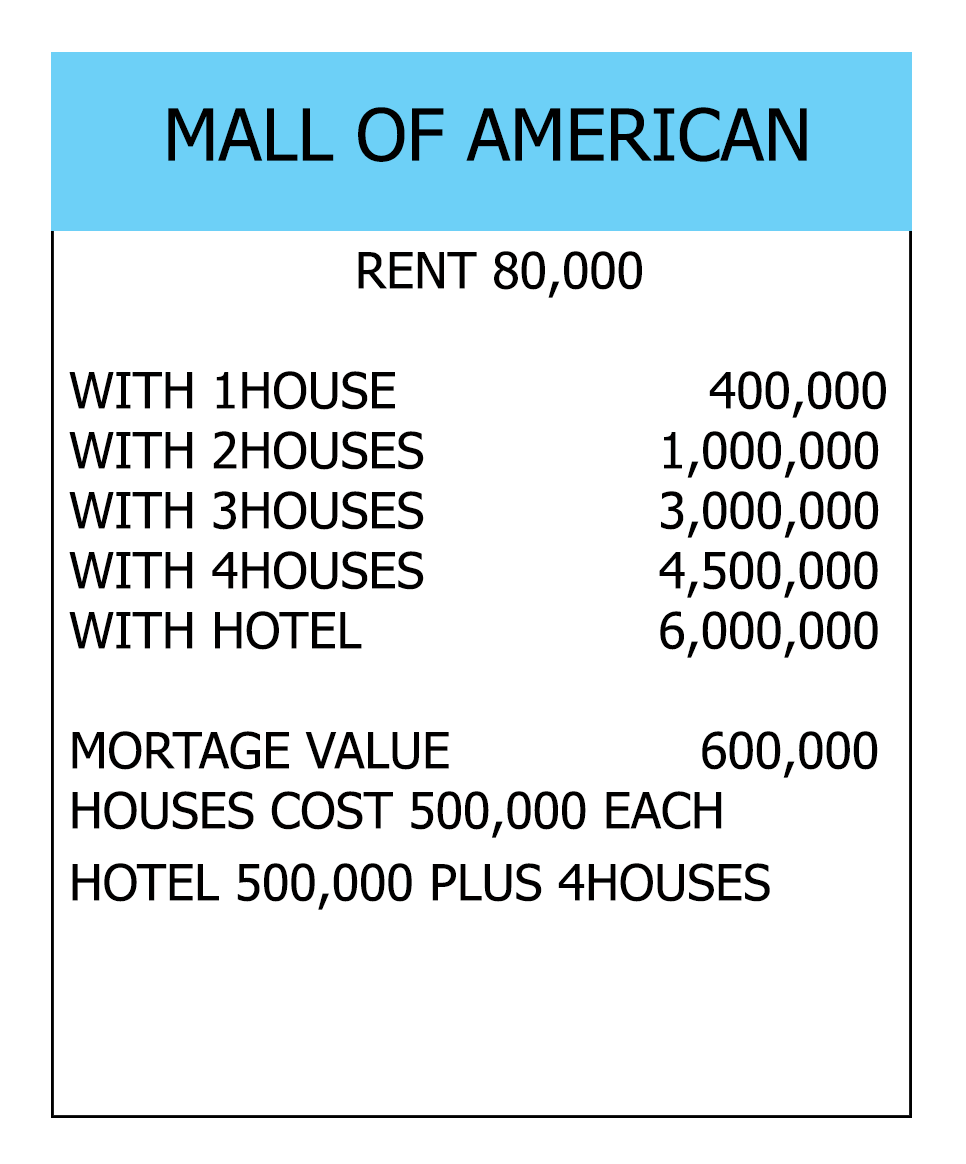
<style>
.page{position:relative;width:966px;height:1164px;background:#ffffff}
.page>*{position:absolute;margin:0}
.t1{font:72px "Tahoma";color:#000000}
.t2{font:50px "Tahoma";color:#010000}
</style>
<div class="page">
<p class="t1" style="left:168px;top:107px;width:639px;height:55px">MALL OF AMERICAN</p>
<p class="t2" style="left:69px;top:251px;width:817px;height:659px;text-align:center">RENT 80,000<br><br>WITH 1HOUSE                    400,000<br>WITH 2HOUSES               1,000,000<br>WITH 3HOUSES               3,000,000<br>WITH 4HOUSES               4,500,000<br>WITH HOTEL                   6,000,000<br><br>MORTAGE VALUE                600,000<br>HOUSES COST 500,000 EACH<br>HOTEL 500,000 PLUS 4HOUSES</p>
</div>
